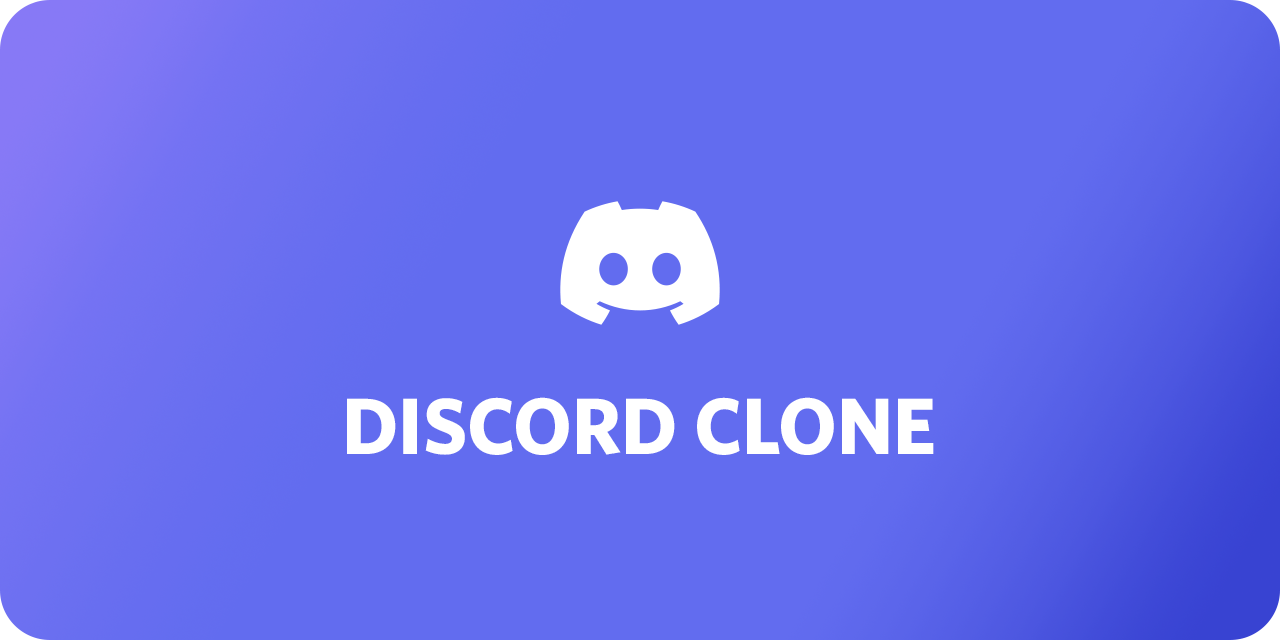
<style>
.page{position:relative;width:1280px;height:640px;background:#626cef}
.page>*{position:absolute;margin:0}
.t1{font:80px "Whitney-Bold";color:#ffffff;text-transform:uppercase}
</style>
<div class="page">
<p class="t1" style="left:347px;top:397px;width:587px;height:58px">Discord Clone</p>
</div>
